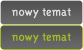
<style>
.page{position:relative;width:83px;height:50px}
.page>*{position:absolute;margin:0}
.t1{font:12px "TriplexLight";letter-spacing:0.01em;color:#dfdfdf;font-weight:bold}
.t2{font:12px "TriplexLight";letter-spacing:0.01em;color:#a1ba25;font-weight:bold}
</style>
<div class="page">
<p class="t1" style="left:12px;top:8px;width:59px;height:11px">nowy temat</p>
<p class="t2" style="left:12px;top:33px;width:59px;height:11px">nowy temat</p>
</div>
